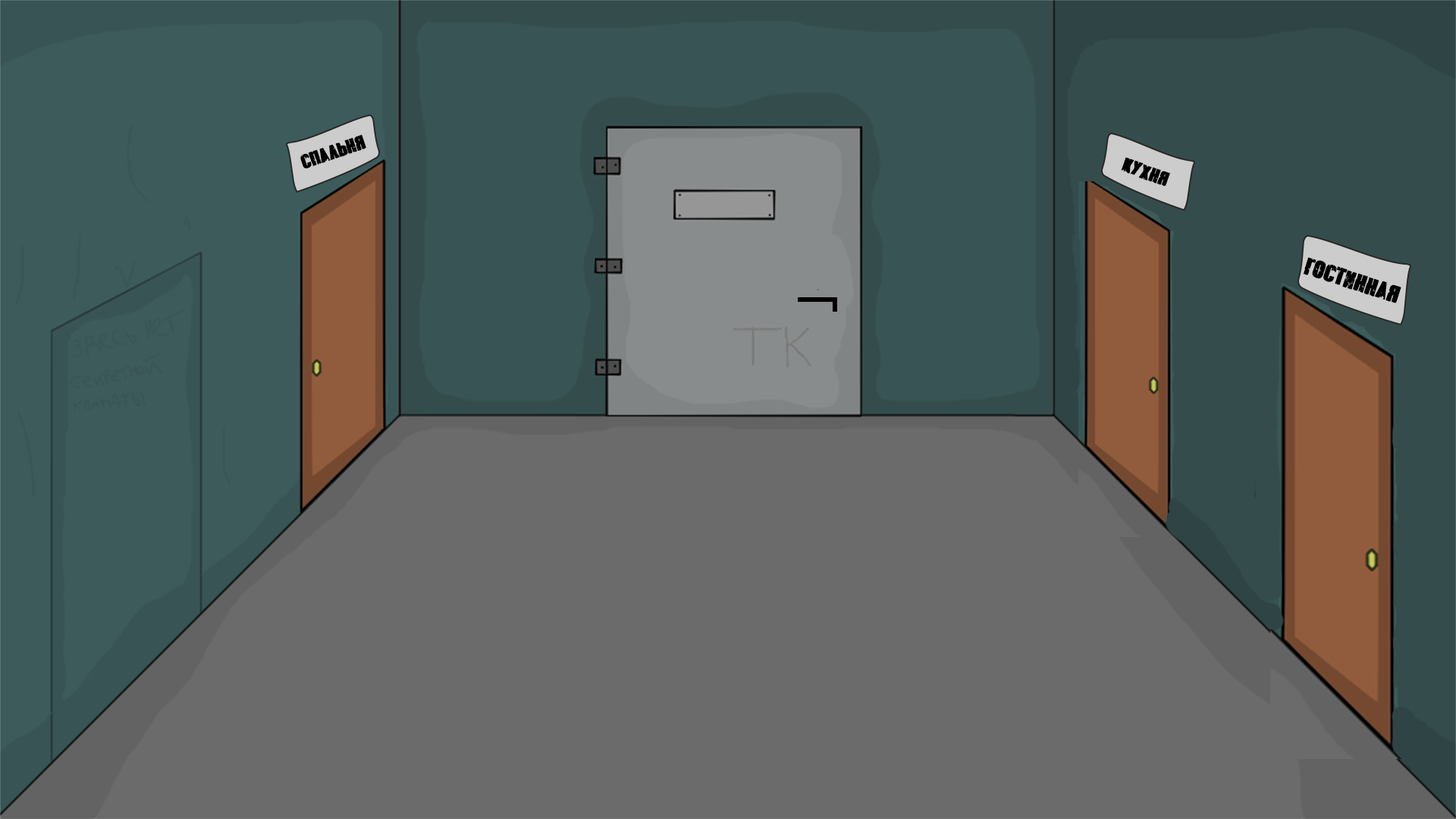
<style>
.page{position:relative;width:1456px;height:819px;background:#6b6b6b}
.page>*{position:absolute;margin:0}
.t1{font:16.8px "BrokenDetroitRUSBYLYAJKA";color:#000000}
.t2{font:20.4px "BrokenDetroitRUSBYLYAJKA";color:#000000}
</style>
<div class="page">
<p class="t1" style="left:300px;top:134px;width:66px;height:34px;rotate:-18deg">спальня</p>
<p class="t1" style="left:1121px;top:157px;width:49px;height:30px;rotate:20deg">Кухня</p>
<p class="t2" style="left:1303px;top:257px;width:98px;height:46px;rotate:18deg">Гостинная</p>
</div>
